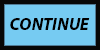
<style>
.page{position:relative;width:100px;height:50px;background:#76cbf2}
.page>*{position:absolute;margin:0}
.t1{font:17.4px "MyriadPro-BoldIt";color:#000000}
</style>
<div class="page">
<p class="t1" style="left:10px;top:18px;width:80px;height:12px">CONTINUE</p>
</div>
